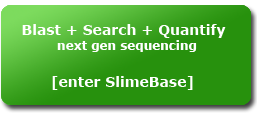
<style>
.page{position:relative;width:257px;height:118px;background:#27910d}
.page>*{position:absolute;margin:0}
.t1{font:14px "Verdana-Bold";color:#ffffff}
.t2{font:12px "Verdana-Bold";color:#ffffff}
</style>
<div class="page">
<p class="t1" style="left:22px;top:24px;width:204px;height:14px">Blast + Search + Quantify</p>
<p class="t2" style="left:57px;top:40px;width:140px;height:12px">next gen sequencing</p>
<p class="t1" style="left:52px;top:76px;width:141px;height:14px">[enter SlimeBase]</p>
</div>
